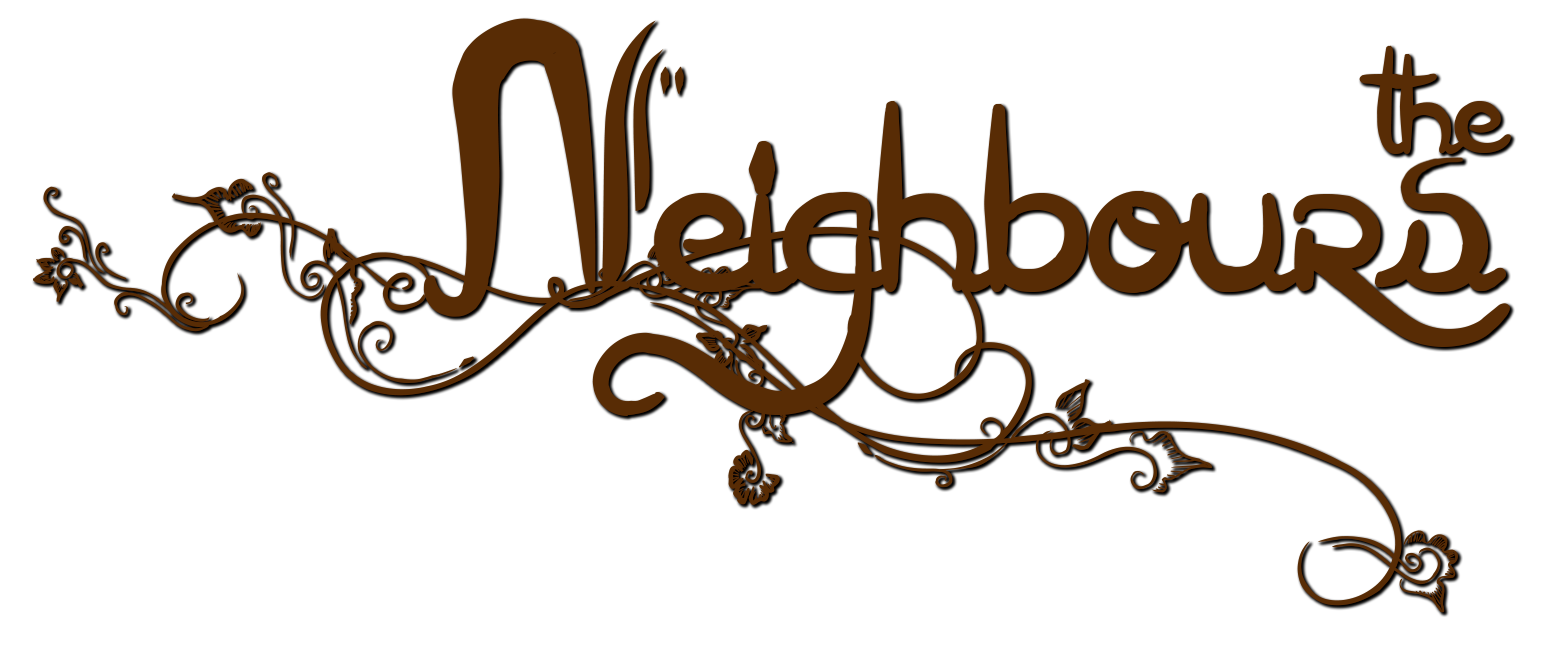
<style>
.page{position:relative;width:1565px;height:656px;background:#ffffff}
.page>*{position:absolute;margin:0}
.t1{font:523.5px "Arabia";color:#582c05}
.t2{font:274.3px "Arabia";color:#582c05}
</style>
<div class="page">
<p class="t1" style="left:33px;top:18px;width:1477px;height:595px">Neighbours</p>
<p class="t2" style="left:1359px;top:45px;width:152px;height:109px">the</p>
</div>
